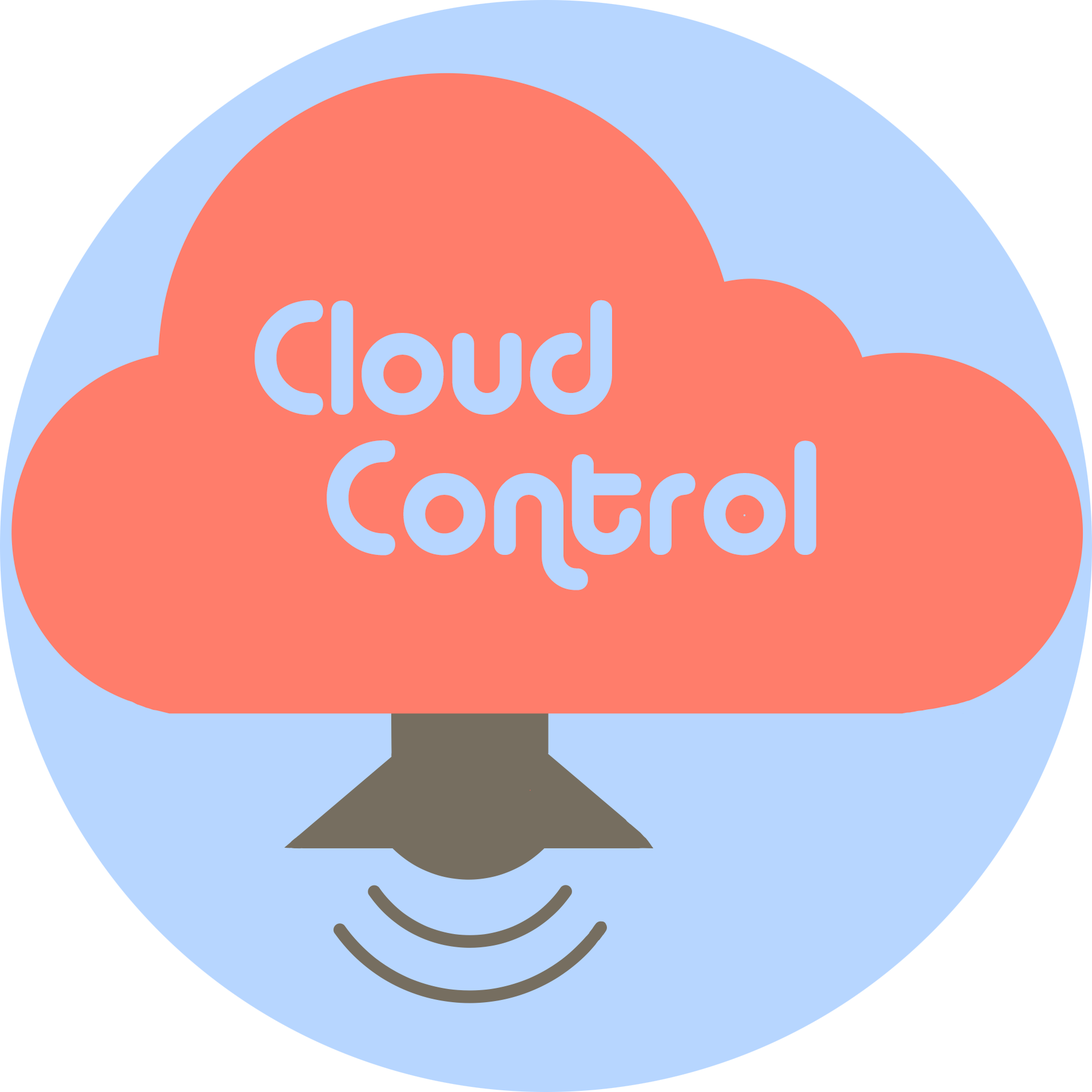
<style>
.page{position:relative;width:1092px;height:1092px;background:#ff7d6b}
.page>*{position:absolute;margin:0}
.t1{font:160.2px "Alba";color:#b7d6ff}
</style>
<div class="page">
<p class="t1" style="left:255px;top:300px;width:357px;height:115px">Cloud</p>
<p class="t1" style="left:327px;top:440px;width:489px;height:150px">Control</p>
</div>
